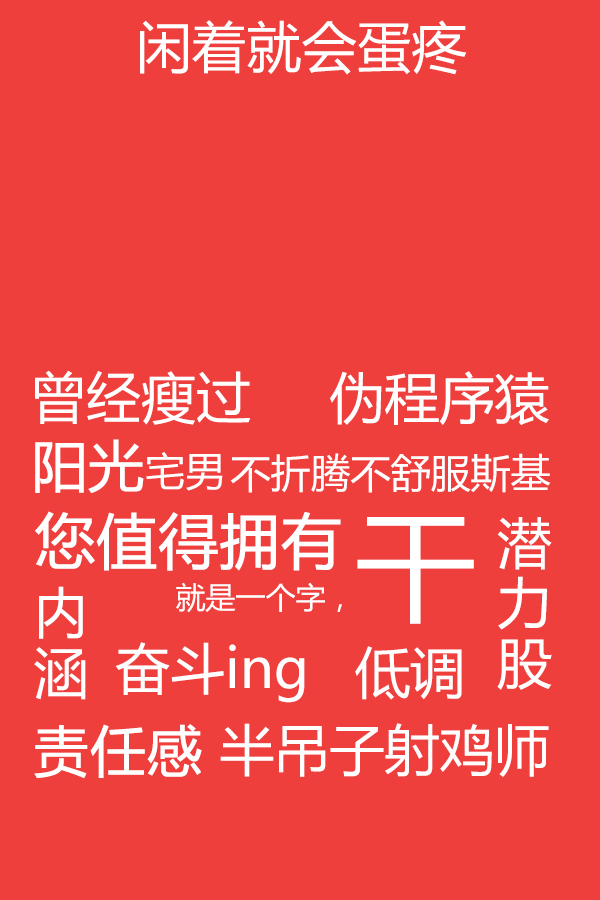
<style>
.page{position:relative;width:600px;height:900px;background:#ef3f3d}
.page>*{position:absolute;margin:0}
.t1{font:55px "MicrosoftYaHei";color:#ffffff}
.t2{font:55px "MicrosoftYaHei";color:#ffffff;font-weight:bold}
.t3{font:40px "MicrosoftYaHei";color:#ffffff}
.t4{font:60px "MicrosoftYaHei";color:#ffffff;font-weight:bold}
.t5{font:30px "MicrosoftYaHei";color:#ffffff}
.t6{font:120px "MicrosoftYaHei";color:#ffffff}
.t7{font:55px/60px "MicrosoftYaHei";color:#ffffff}
</style>
<div class="page">
<p class="t1" style="left:140px;top:20px;width:327px;height:55px">闲着就会蛋疼</p>
<p class="t1" style="left:35px;top:370px;width:216px;height:55px">曾经瘦过</p>
<p class="t1" style="left:330px;top:371px;width:219px;height:54px">伪程序猿</p>
<p class="t2" style="left:35px;top:439px;width:188px;height:54px">阳光<span class="t3">宅男</span></p>
<p class="t3" style="left:230px;top:453px;width:321px;height:40px">不折腾不舒服斯基</p>
<p class="t4" style="left:35px;top:511px;width:306px;height:60px">您值得拥有</p>
<p class="t5" style="left:176px;top:517px;width:298px;height:107px">就是一个字，<span class="t6">干</span></p>
<p class="t7" style="left:497px;top:517px;width:55px;height:173px;text-align:center">潜<br>力<br>股</p>
<p class="t7" style="left:34px;top:586px;width:52px;height:114px;text-align:center">内<br>涵</p>
<p class="t1" style="left:115px;top:642px;width:190px;height:61px">奋斗ing</p>
<p class="t1" style="left:355px;top:646px;width:107px;height:54px">低调</p>
<p class="t2" style="left:34px;top:724px;width:168px;height:54px">责任感</p>
<p class="t1" style="left:220px;top:723px;width:329px;height:54px">半吊子射鸡师</p>
</div>
